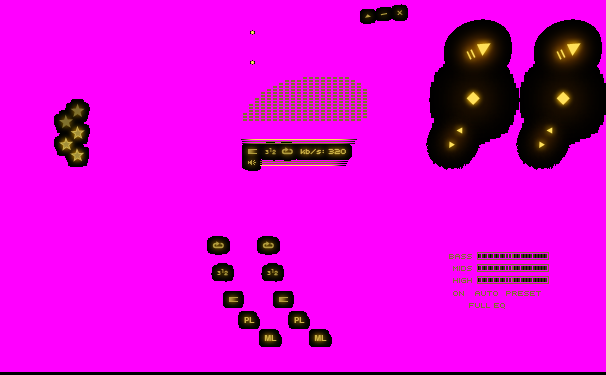
<style>
.page{position:relative;width:606px;height:375px;background:#ff00ff}
.page>*{position:absolute;margin:0}
.t1{font:16.6px "Helvetica";color:#b39d3e;scale:0.65 1}
.t2{font:5.5px "Helvetica";color:#b39d3e;scale:1.41 1}
.t3{font:6px "Helvetica";color:#bba33e}
.t4{font:6px "Helvetica";color:#bba23d}
.t5{font:6px "Helvetica"}
.t6{font:8px "Uni0553";color:#ccb347}
.t7{font:8px "Uni0553";color:#80702d;text-transform:uppercase}
.t8{font:8px "Helvetica-Bold";color:#ccb347}
</style>
<div class="page">
<p class="t1" style="left:380px;top:13px;width:7px;height:3px;rotate:-11deg">_</p>
<p class="t2" style="left:397px;top:10px;width:6px;height:5px;rotate:-4deg">X</p>
<p class="t3" style="left:265px;top:150px;width:4px;height:4px">3</p>
<p class="t4" style="left:269px;top:148px;width:3px;height:4px">1</p>
<p class="t5" style="left:272px;top:149px;width:4px;height:6px">2</p>
<p class="t6" style="left:300px;top:148px;width:46px;height:7px">kb/s: 320</p>
<p class="t7" style="left:449px;top:254px;width:23px;height:5px">Bass</p>
<p class="t4" style="left:221px;top:269px;width:3px;height:4px">1</p>
<p class="t5" style="left:224px;top:270px;width:4px;height:6px">2</p>
<p class="t4" style="left:271px;top:269px;width:3px;height:4px">1</p>
<p class="t5" style="left:274px;top:270px;width:4px;height:6px">2</p>
<p class="t7" style="left:453px;top:266px;width:19px;height:5px">Mids</p>
<p class="t3" style="left:217px;top:271px;width:4px;height:4px">3</p>
<p class="t3" style="left:267px;top:271px;width:4px;height:4px">3</p>
<p class="t7" style="left:453px;top:278px;width:19px;height:5px">High</p>
<p class="t7" style="left:453px;top:291px;width:11px;height:5px">On</p>
<p class="t7" style="left:475px;top:291px;width:23px;height:5px">Auto</p>
<p class="t7" style="left:506px;top:291px;width:35px;height:5px">Preset</p>
<p class="t7" style="left:469px;top:303px;width:36px;height:6px">Full EQ</p>
<p class="t8" style="left:244px;top:317px;width:11px;height:6px">PL</p>
<p class="t8" style="left:294px;top:317px;width:11px;height:6px">PL</p>
<p class="t8" style="left:264px;top:335px;width:13px;height:6px">ML</p>
<p class="t8" style="left:314px;top:335px;width:13px;height:6px">ML</p>
</div>
